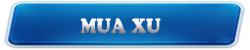
<style>
.page{position:relative;width:250px;height:50px}
.page>*{position:absolute;margin:0}
.t1{font:21.6px "UTM-Cooper-Black";text-transform:uppercase;scale:0.83 1}
</style>
<div class="page">
<p class="t1" style="left:80px;top:18px;width:81px;height:16px">mua xu</p>
</div>
